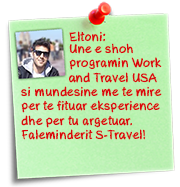
<style>
.page{position:relative;width:180px;height:187px}
.page>*{position:absolute;margin:0}
.t1{font:12px "AxureHandwriting-Bold";color:#da080d}
</style>
<div class="page">
<p class="t1" style="left:69px;top:31px;width:37px;height:11px">Eltoni:</p>
<p class="t1" style="left:69px;top:43px;width:93px;height:40px">Une e shoh <br>programin Work<br>and Travel USA</p>
<p class="t1" style="left:21px;top:86px;width:141px;height:54px">si mundesine me te mire <br>per te fituar eksperience<br>dhe per tu argetuar. <br>Faleminderit S-Travel!</p>
</div>
